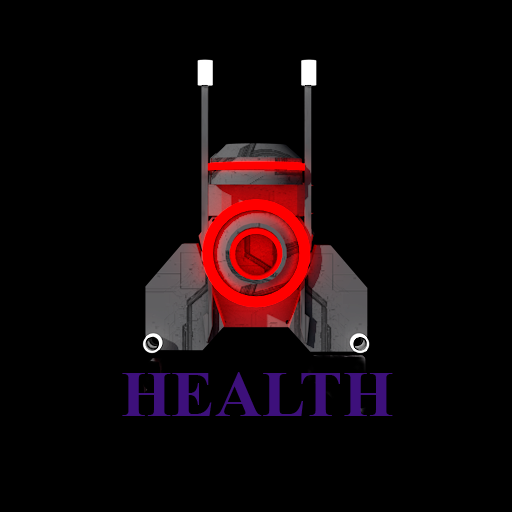
<style>
.page{position:relative;width:512px;height:512px;background:#000000}
.page>*{position:absolute;margin:0}
.t1{font:65px "TimesNewRomanPS-BoldMT";color:#3d107b}
</style>
<div class="page">
<p class="t1" style="left:122px;top:372px;width:271px;height:44px">HEALTH</p>
</div>
